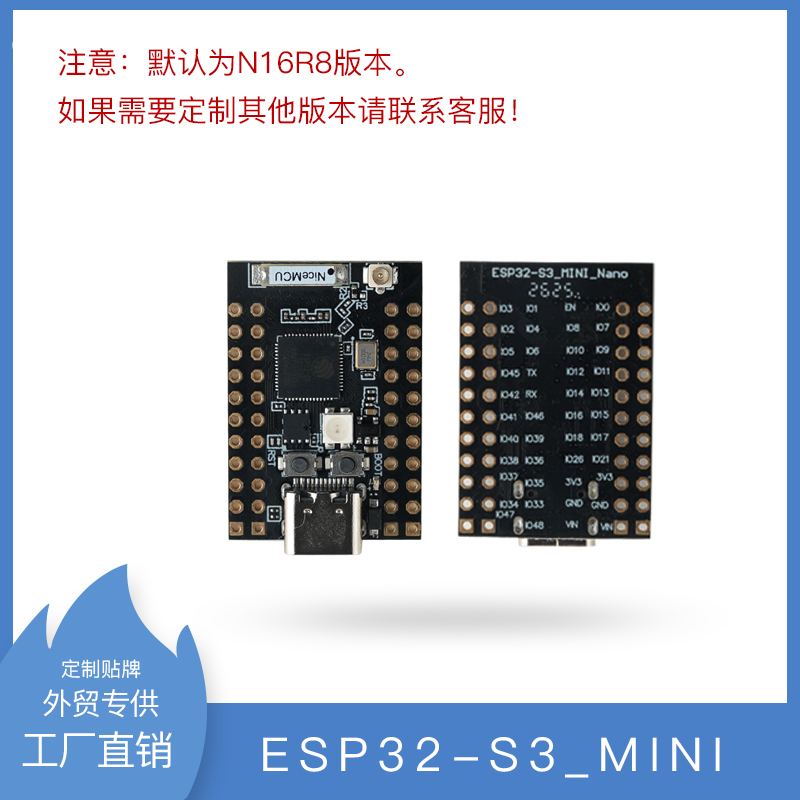
<style>
.page{position:relative;width:800px;height:800px;background:#ffffff}
.page>*{position:absolute;margin:0}
.t1{font:30px/48px "PingFang-SC-Medium";color:#be0000}
.t2{font:20px "PingFang-SC-Medium";letter-spacing:0.01em;color:#ffffff}
.t3{font:30px "PingFang-SC-Medium";letter-spacing:-0.025em;color:#ffffff}
.t4{font:40px "PingFang-SC-Medium";letter-spacing:-0.05em;color:#ffffff}
.t5{font:46.6px "PingFang-SC-Medium";letter-spacing:0.2em;color:#ffffff}
</style>
<div class="page">
<p class="t1" style="left:58px;top:48px;width:459px;height:77px">注意：默认为N16R8版本。<br>如果需要定制其他版本请联系客服！</p>
<p class="t2" style="left:61px;top:659px;width:80px;height:20px">定制贴牌</p>
<p class="t3" style="left:43px;top:689px;width:116px;height:29px">外贸专供</p>
<p class="t4" style="left:22px;top:731px;width:150px;height:37px">工厂直销</p>
<p class="t5" style="left:263px;top:737px;width:457px;height:41px">ESP32-S3_MINI</p>
</div>
